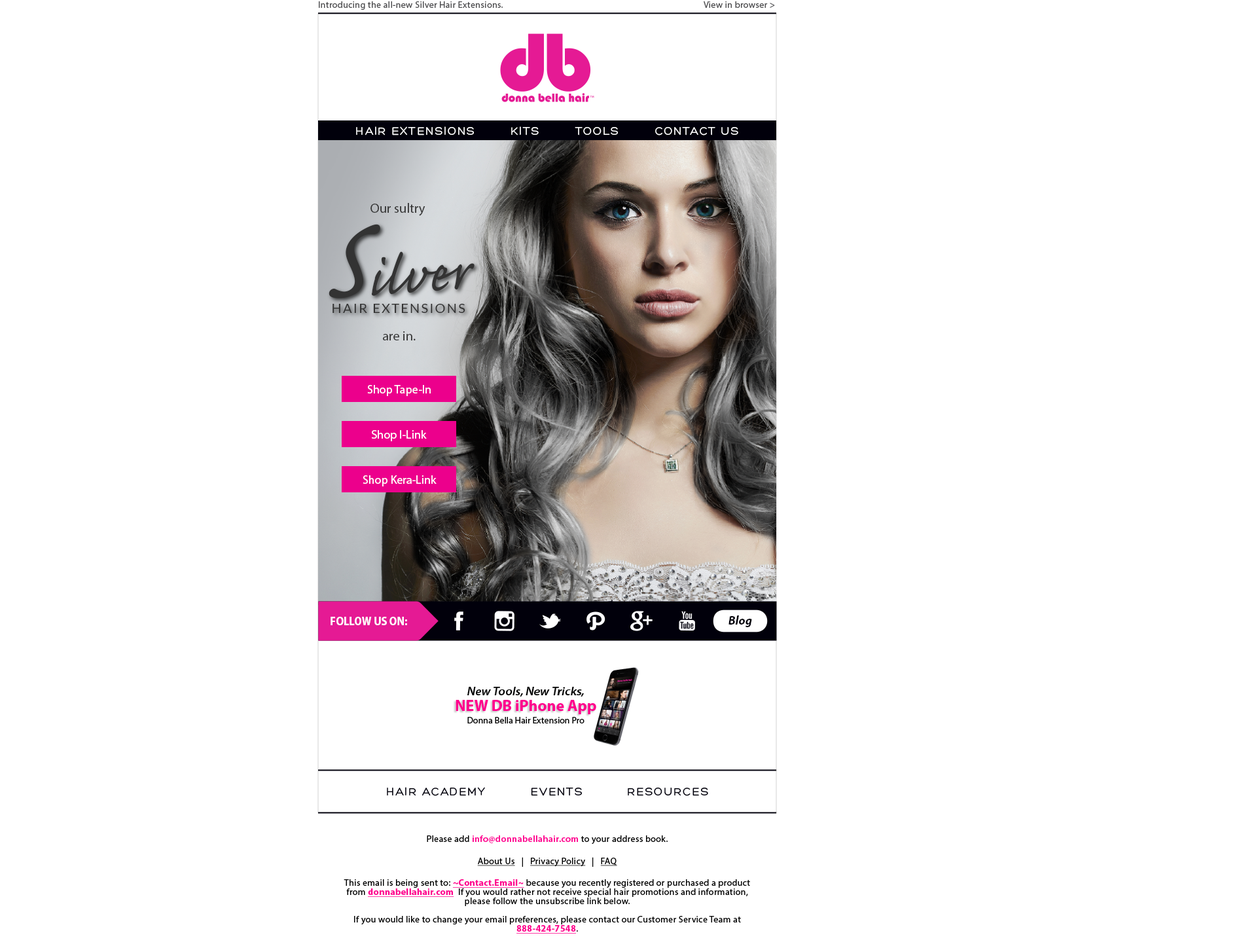
<style>
.page{position:relative;width:1258px;height:948px;background:#ffffff}
.page>*{position:absolute;margin:0}
.t1{font:9.2px "MyriadPro-Regular";letter-spacing:0.025em;color:#4d4d4f}
.t2{font:11.8px "Hero";letter-spacing:0.1em;color:#ffffff}
.t3{font:13.3px "MyriadPro-Regular";color:#333333}
.t4{font:68.9px "CaflischScriptPro-Regular";color:#333333}
.t5{font:147.9px "CaflischScriptPro-Regular";color:#333333}
.t6{font:13.3px "Lato-Regular";letter-spacing:0.1em;color:#333333}
.t7{font:11.8px "MyriadPro-Regular";color:#ffffff}
.t8{font:11.8px "MyriadPro-BoldSemiCn";color:#ffffff}
.t9{font:12.2px "MyriadPro-BoldIt";color:#01000b}
.t10{font:11.8px "MyriadPro-SemiboldSemiExtIt";color:#000000}
.t11{font:15.7px "MyriadPro-Bold";color:#ff008c}
.t12{font:9.2px "MyriadPro-Regular";color:#000000}
.t13{font:11.8px "Hero";letter-spacing:0.1em;color:#01000b}
.t14{font:9.2px/9.2px "MyriadPro-Regular";letter-spacing:0.025em;color:#000000}
.t15{font:9.2px "MyriadPro-Regular";letter-spacing:0.025em;color:#000000}
.t16{font:9.2px "MyriadPro-Semibold";letter-spacing:0.025em;color:#ff008c}
.t17{font:9.2px "MyriadPro-Regular";letter-spacing:0.025em;color:#000000;text-decoration:underline}
.t18{font:9.2px "MyriadPro-Bold";letter-spacing:0.025em;color:#ff008c;text-decoration:underline}
.t19{font:9.2px/9.2px "MyriadPro-Bold";letter-spacing:0.025em;color:#ff008c;text-decoration:underline}
</style>
<div class="page">
<p class="t1" style="left:319px;top:1px;width:456px;height:9px">Introducing the all-new Silver Hair Extensions.              View in browser &gt;</p>
<p class="t2" style="left:356px;top:126px;width:382px;height:9px">HAIR EXTENSIONS        KITS        TOOLS        CONTACT US</p>
<p class="t3" style="left:370px;top:203px;width:55px;height:13px">Our sultry</p>
<p class="t4" style="left:329px;top:224px;width:146px;height:74px"><span class="t5">S</span>ilver</p>
<p class="t6" style="left:333px;top:304px;width:132px;height:9px">HAIR EXTENSIONS</p>
<p class="t3" style="left:383px;top:331px;width:33px;height:9px">are in.</p>
<p class="t7" style="left:367px;top:385px;width:64px;height:11px">Shop Tape-In</p>
<p class="t7" style="left:372px;top:430px;width:55px;height:11px">Shop I-Link</p>
<p class="t7" style="left:363px;top:475px;width:74px;height:11px">Shop Kera-Link</p>
<p class="t8" style="left:331px;top:617px;width:76px;height:8px">FOLLOW US ON:</p>
<p class="t9" style="left:729px;top:615px;width:23px;height:12px">Blog</p>
<p class="t10" style="left:467px;top:687px;width:117px;height:9px">New Tools, New Tricks,</p>
<p class="t11" style="left:456px;top:700px;width:140px;height:14px">NEW DB iPhone App</p>
<p class="t12" style="left:467px;top:717px;width:118px;height:6px">Donna Bella Hair Extension Pro</p>
<p class="t13" style="left:387px;top:787px;width:321px;height:9px">HAIR ACADEMY          EVENTS          RESOURCES</p>
<p class="t14" style="left:344px;top:835px;width:406px;height:98px;text-align:center"><span class="t15">Please add </span><span class="t16">info@donnabellahair.com</span><span class="t15"> to your address book.<br><br></span><span class="t17">About Us</span><span class="t15">   |   </span><span class="t17">Privacy Policy</span><span class="t15">   |   </span><span class="t17">FAQ<br></span><span class="t15"><br>This email is being sent to: </span><span class="t18">~Contact.Email~</span><span class="t15"> because you recently registered </span>or purchased a product from <span class="t19">donnabellahair.com</span>  If you would rather not receive special hair promotions and information, please follow the unsubscribe link below.<br><br>If you would like to change your email preferences, please contact our Customer Service Team at <span class="t19">888-424-7548</span>.</p>
</div>
